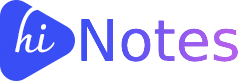
<style>
.page{position:relative;width:250px;height:82px;background:#ffffff}
.page>*{position:absolute;margin:0}
.t1{font:57px "DejaVuSans"}
</style>
<div class="page">
<p class="t1" style="left:81px;top:19px;width:157px;height:43px">Notes</p>
</div>
